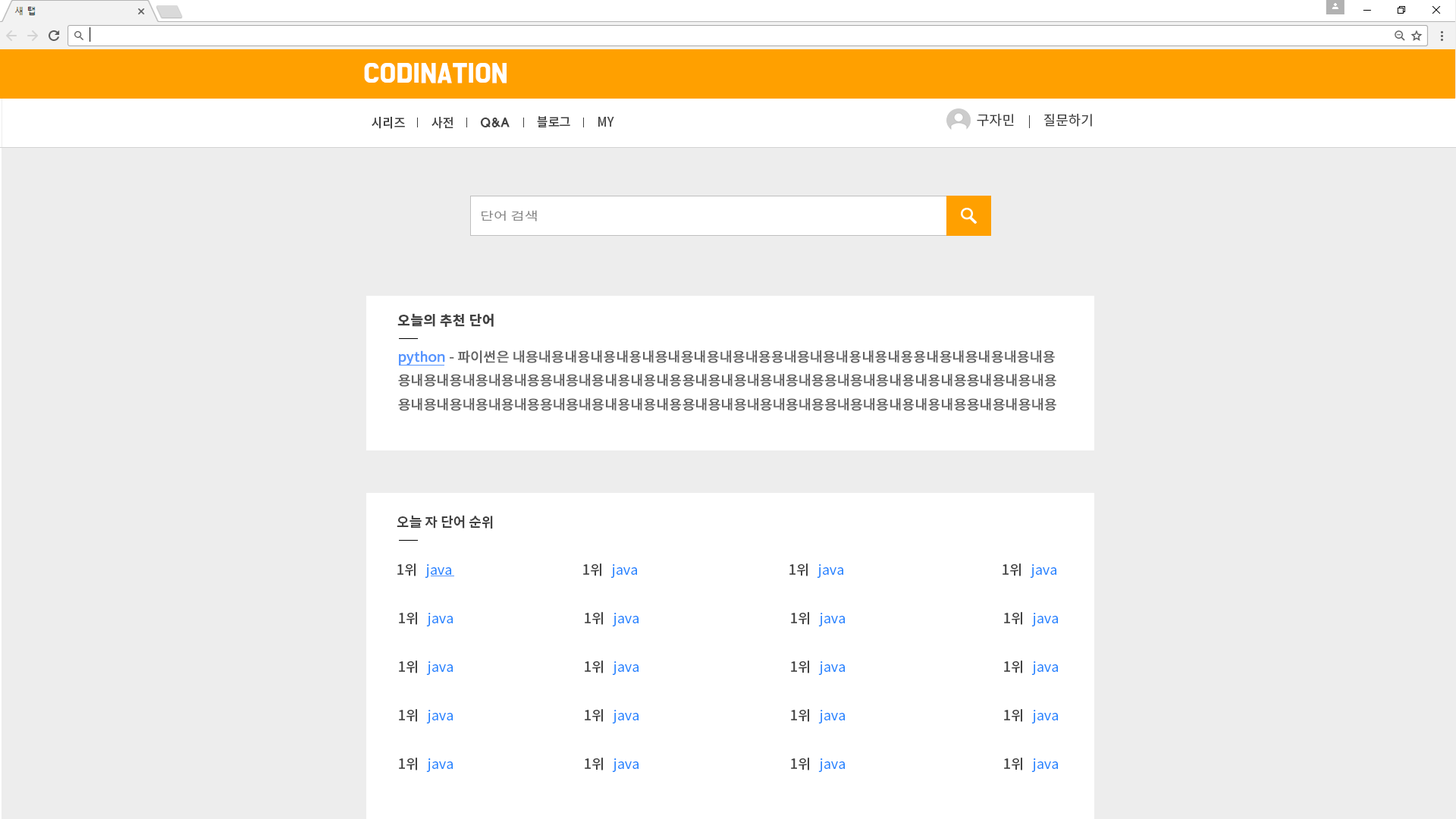
<style>
.page{position:relative;width:1456px;height:819px;background:#ededed}
.page>*{position:absolute;margin:0}
.t1{font:22.7px "BMDoHyeon";color:#ffffff;font-weight:bold}
.t2{font:13.6px "NotoSansCJKkr-Regular";color:#424242}
.t3{font:12.6px "NotoSansCJKkr-Medium";letter-spacing:-0.01em;color:#424242}
.t4{font:12.6px "HYwulB";letter-spacing:-0.025em;color:#424242}
.t5{font:11.3px "NotoSansCJKkr-DemiLight";color:#888888;scale:1.32 1}
.t6{font:13.6px "NotoSansCJKkr-Bold";color:#424242;font-weight:bold}
.t7{font:13.6px "NotoSansCJKkr-Regular";color:#656565;font-weight:bold}
.t8{font:13.6px "NotoSansCJKkr-Regular";color:#5595ff;font-weight:bold}
.t9{font:13.6px "NotoSansCJKkr-Bold";color:#424242}
.t10{font:13.6px "NotoSansCJKkr-DemiLight";color:#2184ff}
.t11{font:13.6px "NotoSansCJKkr-Medium";color:#424242}
</style>
<div class="page">
<p class="t1" style="left:364px;top:63px;width:143px;height:20px">CODINATION</p>
<p class="t2" style="left:977px;top:114px;width:37px;height:13px">구자민</p>
<p class="t2" style="left:1044px;top:114px;width:48px;height:13px">질문하기</p>
<p class="t3" style="left:372px;top:117px;width:33px;height:12px">시리즈</p>
<p class="t3" style="left:431px;top:117px;width:22px;height:12px">사전</p>
<p class="t4" style="left:480px;top:118px;width:30px;height:9px">Q&amp;A</p>
<p class="t3" style="left:537px;top:116px;width:33px;height:11px">블로그</p>
<p class="t3" style="left:598px;top:117px;width:16px;height:10px">MY</p>
<p class="t5" style="left:482px;top:210px;width:55px;height:11px">단어 검색</p>
<p class="t6" style="left:397px;top:313px;width:97px;height:14px">오늘의 추천 단어</p>
<p class="t7" style="left:398px;top:350px;width:658px;height:61px"><span class="t8">python</span> - 파이썬은 내용내용내용내용내용내용내용내용내용내용용내용내용내용내용내용용내용내용내용내용내용<br>용내용내용내용내용내용용내용내용내용내용내용용내용내용내용내용내용용내용내용내용내용내용용내용내용내용<br>용내용내용내용내용내용용내용내용내용내용내용용내용내용내용내용내용용내용내용내용내용내용용내용내용내용</p>
<p class="t9" style="left:397px;top:515px;width:96px;height:14px">오늘 자 단어 순위</p>
<p class="t10" style="left:397px;top:563px;width:54px;height:15px"><span class="t11">1위  </span> java</p>
<p class="t10" style="left:583px;top:563px;width:54px;height:15px"><span class="t11">1위  </span> java</p>
<p class="t10" style="left:789px;top:563px;width:54px;height:15px"><span class="t11">1위  </span> java</p>
<p class="t10" style="left:1003px;top:563px;width:53px;height:15px"><span class="t11">1위  </span> java</p>
<p class="t10" style="left:399px;top:612px;width:54px;height:14px"><span class="t11">1위  </span> java</p>
<p class="t10" style="left:585px;top:612px;width:54px;height:14px"><span class="t11">1위  </span> java</p>
<p class="t10" style="left:791px;top:612px;width:54px;height:14px"><span class="t11">1위  </span> java</p>
<p class="t10" style="left:1004px;top:612px;width:54px;height:14px"><span class="t11">1위  </span> java</p>
<p class="t10" style="left:399px;top:660px;width:54px;height:15px"><span class="t11">1위  </span> java</p>
<p class="t10" style="left:585px;top:660px;width:54px;height:15px"><span class="t11">1위  </span> java</p>
<p class="t10" style="left:791px;top:660px;width:54px;height:15px"><span class="t11">1위  </span> java</p>
<p class="t10" style="left:1004px;top:660px;width:54px;height:15px"><span class="t11">1위  </span> java</p>
<p class="t10" style="left:399px;top:709px;width:54px;height:14px"><span class="t11">1위  </span> java</p>
<p class="t10" style="left:585px;top:709px;width:54px;height:14px"><span class="t11">1위  </span> java</p>
<p class="t10" style="left:791px;top:709px;width:54px;height:14px"><span class="t11">1위  </span> java</p>
<p class="t10" style="left:1004px;top:709px;width:54px;height:14px"><span class="t11">1위  </span> java</p>
<p class="t10" style="left:399px;top:758px;width:54px;height:14px"><span class="t11">1위  </span> java</p>
<p class="t10" style="left:585px;top:758px;width:54px;height:14px"><span class="t11">1위  </span> java</p>
<p class="t10" style="left:791px;top:758px;width:54px;height:14px"><span class="t11">1위  </span> java</p>
<p class="t10" style="left:1004px;top:758px;width:54px;height:14px"><span class="t11">1위  </span> java</p>
</div>
